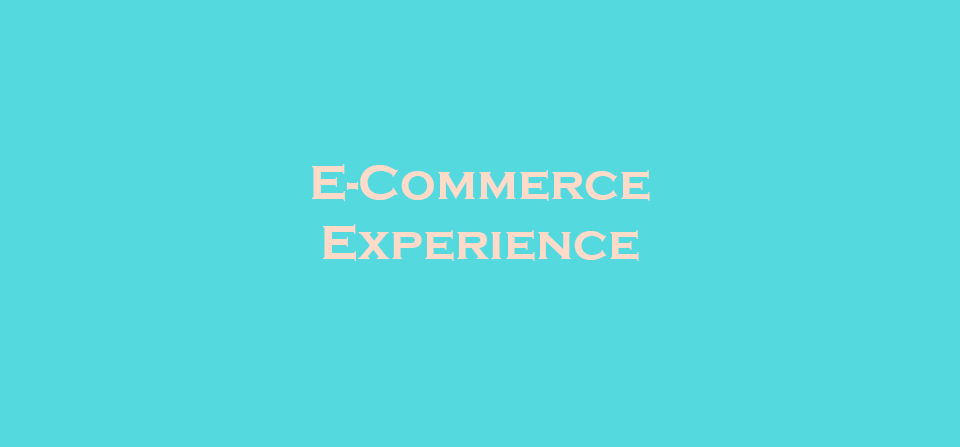
<style>
.page{position:relative;width:960px;height:447px;background:#54d9de}
.page>*{position:absolute;margin:0}
.t1{font:50px "CopperplateGothic-Bold";color:#fedac9}
</style>
<div class="page">
<p class="t1" style="left:312px;top:164px;width:338px;height:97px;text-align:center">E-Commerce<br>Experience</p>
</div>
